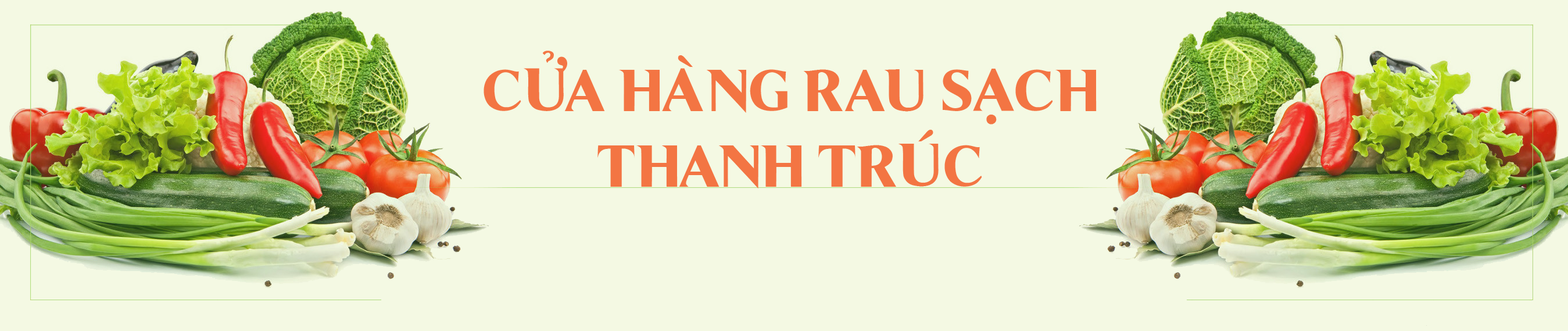
<style>
.page{position:relative;width:1568px;height:331px;background:#f4f9e3}
.page>*{position:absolute;margin:0}
.t1{font:58.1px "Coke4U";color:#f37543}
</style>
<div class="page">
<p class="t1" style="left:484px;top:51px;width:613px;height:73px">CỬA HÀNG RAU SẠCH</p>
<p class="t1" style="left:597px;top:130px;width:385px;height:58px">THANH TRÚC</p>
</div>
